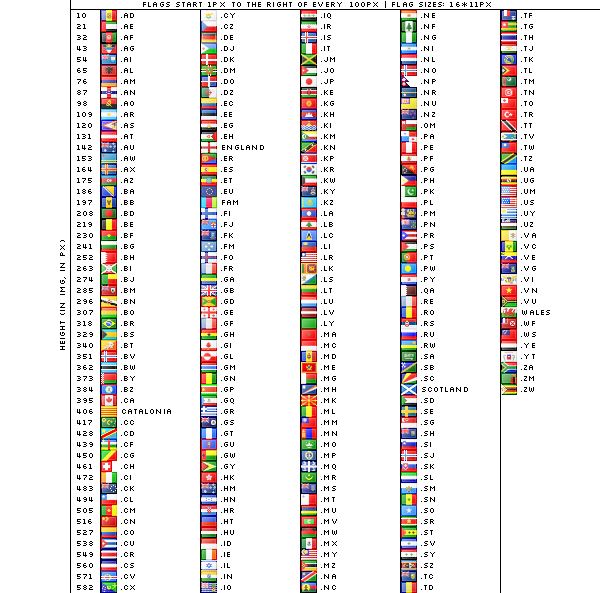
<style>
.page{position:relative;width:600px;height:593px;background:#ffffff}
.page>*{position:absolute;margin:0}
.t1{font:9px "Silkscreen";letter-spacing:0.01em;color:#000000}
.t2{font:9px/11px "Silkscreen";letter-spacing:0.01em;color:#000000}
</style>
<div class="page">
<p class="t1" style="left:143px;top:1px;width:348px;height:7px">Flags start 1px to the right of every 100PX | Flag sizes: 16*11PX</p>
<p class="t2" style="left:121px;top:13px;width:50px;height:577px">.AD<br>.AE<br>.AF<br>.AG<br>.AI<br>.AL<br>.AM<br>.AN<br>.AO<br>.AR<br>.AS<br>.AT<br>.AU<br>.AW<br>.AX<br>.AZ<br>.BA<br>.BB<br>.BD<br>.BE<br>.BF<br>.BG<br>.BH<br>.BI<br>.BJ<br>.BM<br>.BN<br>.BO<br>.BR<br>.BS<br>.BT<br>.BV<br>.BW<br>.BY<br>.BZ<br>.CA<br>CATALONIA<br>.CC<br>.CD<br>.CF<br>.CG<br>.CH<br>.CI<br>.CK<br>.CL<br>.CM<br>.CN<br>.CO<br>.CU<br>.CR<br>.CS<br>.CV<br>.CX</p>
<p class="t2" style="left:221px;top:13px;width:43px;height:577px">.CY<br>.CZ<br>.DE<br>.DJ<br>.DK<br>.DM<br>.DO<br>.DZ<br>.EC<br>.EE<br>.EG<br>.EH<br>ENGLAND<br>.ER<br>.ES<br>.ET<br>.EU<br>FAM<br>.FI<br>.FJ<br>.FK<br>.FM<br>.FO<br>.FR<br>.GA<br>.GB<br>.GD<br>.GE<br>.GF<br>.GH<br>.GI<br>.GL<br>.GM<br>.GN<br>.GP<br>.GQ<br>.GR<br>.GS<br>.GT<br>.GU<br>.GW<br>.GY<br>.HK<br>.HM<br>.HN<br>.HR<br>.HT<br>.HU<br>.ID<br>.IE<br>.IL<br>.IN<br>.IO</p>
<p class="t2" style="left:321px;top:13px;width:16px;height:577px">.IQ<br>.IR<br>.IS<br>.IT<br>.JM<br>.JO<br>.JP<br>.KE<br>.KG<br>.KH<br>.KI<br>.KM<br>.KN<br>.KP<br>.KR<br>.KW<br>.KY<br>.KZ<br>.LA<br>.LB<br>.LC<br>.LI<br>.LR<br>.LK<br>.LS<br>.LT<br>.LU<br>.LV<br>.LY<br>.MA<br>.MC<br>.MD<br>.ME<br>.MG<br>.MH<br>.MK<br>.ML<br>.MM<br>.MN<br>.MO<br>.MP<br>.MQ<br>.MR<br>.MS<br>.MT<br>.MU<br>.MV<br>.MW<br>.MX<br>.MY<br>.MZ<br>.NA<br>.NC</p>
<p class="t2" style="left:421px;top:13px;width:47px;height:577px">.NE<br>.NF<br>.NG<br>.NI<br>.NL<br>.NO<br>.NP<br>.NR<br>.NU<br>.NZ<br>.OM<br>.PA<br>.PE<br>.PF<br>.PG<br>.PH<br>.PK<br>.PL<br>.PM<br>.PN<br>.PR<br>.PS<br>.PT<br>.PW<br>.PY<br>.QA<br>.RE<br>.RO<br>.RS<br>.RU<br>.RW<br>.SA<br>.SB<br>.SC<br>SCOTLAND<br>.SD<br>.SE<br>.SG<br>.SH<br>.SI<br>.SJ<br>.SK<br>.SL<br>.SM<br>.SN<br>.SO<br>.SR<br>.ST<br>.SV<br>.SY<br>.SZ<br>.TC<br>.TD</p>
<p class="t2" style="left:521px;top:13px;width:29px;height:379px">.TF<br>.TG<br>.TH<br>.TJ<br>.TK<br>.TL<br>.TM<br>.TN<br>.TO<br>.TR<br>.TT<br>.TV<br>.TW<br>.TZ<br>.UA<br>.UG<br>.UM<br>.US<br>.UY<br>.UZ<br>.VA<br>.VC<br>.VE<br>.VG<br>.VI<br>.VN<br>.VU<br>WALES<br>.WF<br>.WS<br>.YE<br>.YT<br>.ZA<br>.ZM<br>.ZW</p>
<p class="t1" style="left:60px;top:240px;width:6px;height:110px;rotate:-90deg">height (in IMG, IN PX)</p>
</div>
